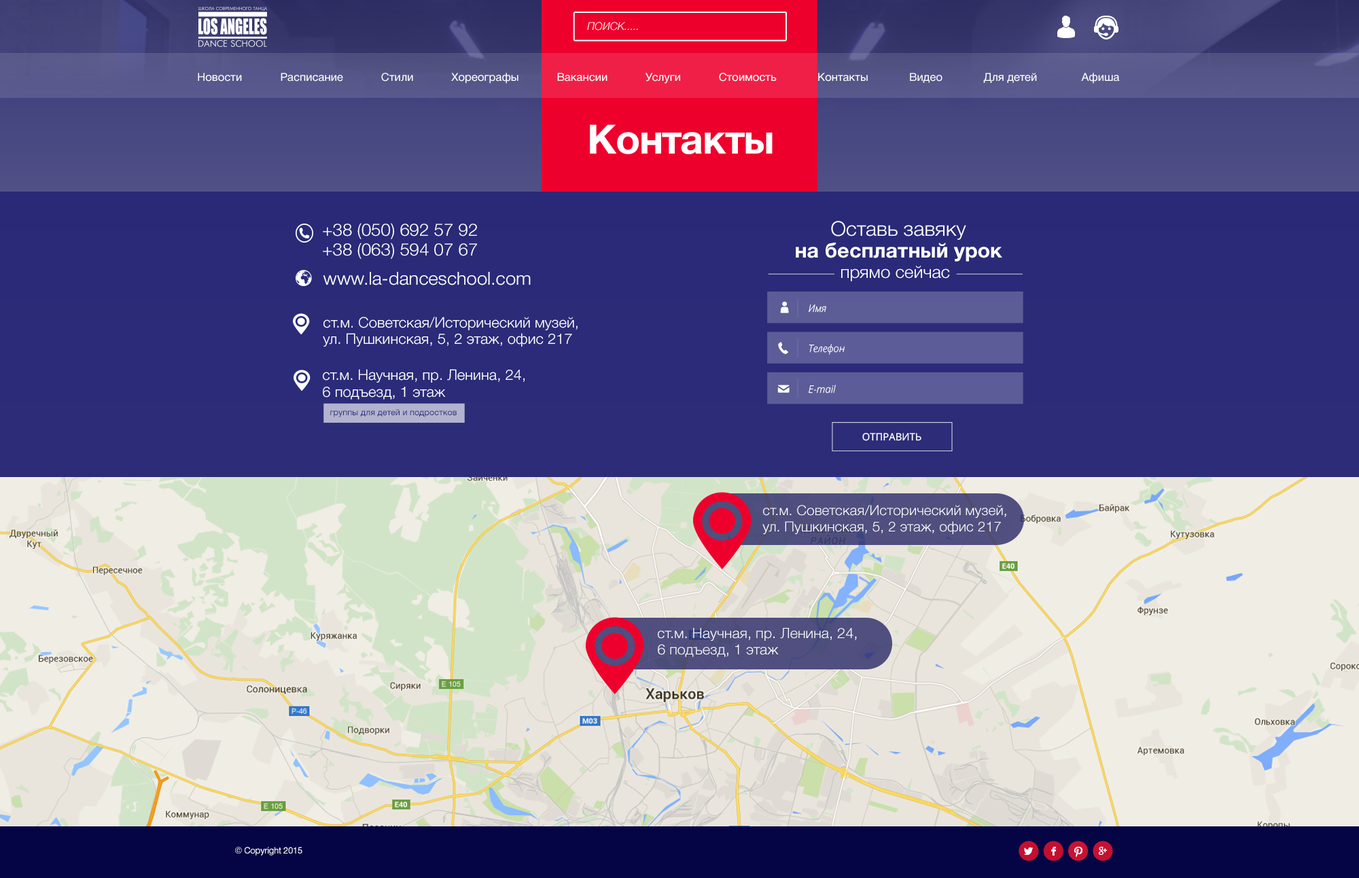
<style>
.page{position:relative;width:1359px;height:878px}
.page>*{position:absolute;margin:0}
.t1{font:10.6px "HelveticaNeueCyr-LightItalic";color:#ffffff;text-transform:uppercase}
.t2{font:11px "HelveticaNeueCyr-Roman";color:#ffffff}
.t3{font:40.3px "HelveticaNeueCyr-Bold";letter-spacing:-0.025em;color:#ffffff}
.t4{font:20.3px/19px "HelveticaNeueCyr-Bold";color:#ffffff}
.t5{font:20.3px/19px "HelveticaNeueCyr-Light";color:#ffffff}
.t6{font:17.1px/17.4px "HelveticaNeueCyr-Light";color:#ffffff}
.t7{font:17.2px "HelveticaNeueCyr-Light";color:#ffffff}
.t8{font:18.1px "HelveticaNeueCyr-Light";color:#ffffff}
.t9{font:10.1px "OpenSansLight-Italic";color:#ffffff}
.t10{font:14.5px/14.8px "HelveticaNeueCyr-Light";color:#ffffff}
.t11{font:14.5px/14.7px "HelveticaNeueCyr-Light";color:#ffffff;scale:1.03 1}
.t12{font:8.3px "HelveticaNeueCyr-Roman";color:#292977;scale:1.04 1}
.t13{font:10.1px "OpenSans";color:#ffffff;text-transform:uppercase}
.t14{font:13.9px/14.1px "HelveticaNeueCyr-Light";color:#ffffff;scale:1.03 1}
.t15{font:14.3px/14.5px "HelveticaNeueCyr-Light";color:#ffffff;scale:1.03 1}
.t16{font:8.9px "HelveticaNeueCyr-Roman";letter-spacing:-0.025em;color:#ffffff}
</style>
<div class="page">
<p class="t1" style="left:587px;top:22px;width:51px;height:9px">ПОИСК.....</p>
<p class="t2" style="left:198px;top:73px;width:922px;height:11px">Новости            Расписание            Стили            Хореографы            Вакансии            Услуги            Стоимость             Контакты             Видео             Для детей              Афиша</p>
<p class="t3" style="left:590px;top:124px;width:182px;height:30px">Контакты</p>
<p class="t4" style="left:795px;top:221px;width:207px;height:41px;text-align:center"><span class="t5">Оставь завяку<br></span>на бесплатный урок</p>
<p class="t6" style="left:323px;top:223px;width:154px;height:36px">+38 (050) 692 57 92<br>+38 (063) 594 07 67</p>
<p class="t7" style="left:841px;top:266px;width:109px;height:15px">прямо сейчас</p>
<p class="t8" style="left:323px;top:272px;width:208px;height:13px">www.la-danceschool.com</p>
<p class="t9" style="left:808px;top:304px;width:18px;height:8px">Имя</p>
<p class="t10" style="left:323px;top:317px;width:254px;height:29px">ст.м. Советская/Исторический музей, <br>ул. Пушкинская, 5, 2 этаж, офис 217</p>
<p class="t9" style="left:808px;top:344px;width:36px;height:11px">Телефон</p>
<p class="t11" style="left:323px;top:369px;width:201px;height:30px">ст.м. Научная, пр. Ленина, 24, <br>6 подъезд, 1 этаж</p>
<p class="t9" style="left:808px;top:384px;width:28px;height:9px">E-mail</p>
<p class="t12" style="left:330px;top:409px;width:126px;height:8px">группы для детей и подростков</p>
<p class="t13" style="left:862px;top:433px;width:59px;height:8px">Отправить</p>
<p class="t14" style="left:762px;top:505px;width:244px;height:29px">ст.м. Советская/Исторический музей, <br>ул. Пушкинская, 5, 2 этаж, офис 217</p>
<p class="t15" style="left:658px;top:628px;width:199px;height:29px">ст.м. Научная, пр. Ленина, 24, <br>6 подъезд, 1 этаж</p>
<p class="t16" style="left:235px;top:846px;width:67px;height:9px">© Copyright 2015</p>
</div>
